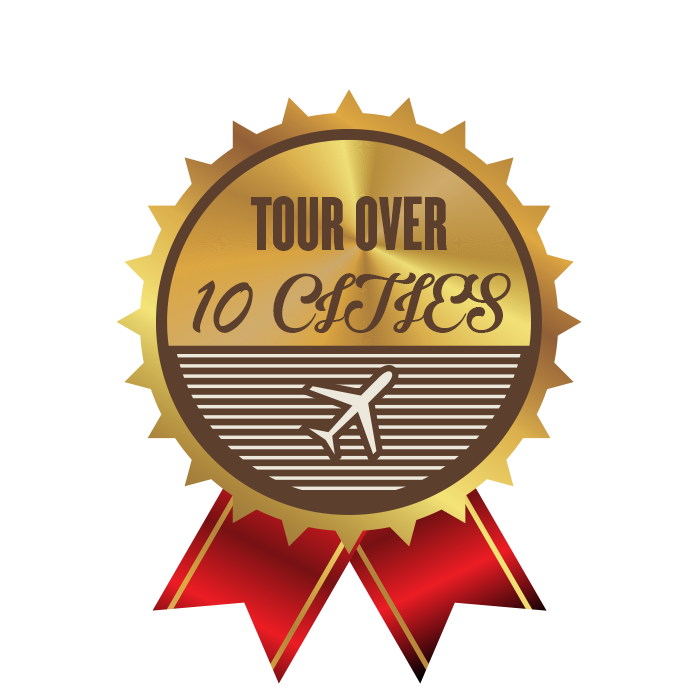
<style>
.page{position:relative;width:699px;height:699px;background:#ffffff}
.page>*{position:absolute;margin:0}
.t1{font:66.7px "Champion-HTF-Featherweight";color:#5c3f2d;scale:1.1 1}
.t2{font:83.3px "BrannbollNyPersonalUseOnly";color:#5c3f2d}
.t3{font:83.3px "BrushScriptMT";color:#5c3f2d}
</style>
<div class="page">
<p class="t1" style="left:251px;top:196px;width:196px;height:55px">TOUR OVER</p>
<p class="t2" style="left:192px;top:272px;width:319px;height:61px"><span class="t3">10 </span>CITIES</p>
</div>
